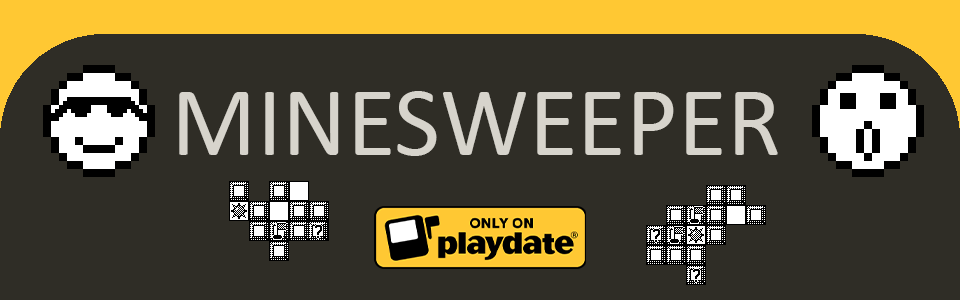
<style>
.page{position:relative;width:960px;height:300px;background:#2f2d26}
.page>*{position:absolute;margin:0}
.t1{font:100px "Calibri";color:#d7d4cc}
</style>
<div class="page">
<p class="t1" style="left:179px;top:91px;width:599px;height:65px">MINESWEEPER</p>
</div>
